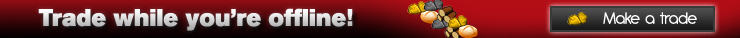
<style>
.page{position:relative;width:740px;height:38px}
.page>*{position:absolute;margin:0}
.t1{font:24px "AkzidenzGroteskBQ-Super"}
.t2{font:18px "Antipasto";color:#ffffff}
</style>
<div class="page">
<p class="t1" style="left:38px;top:8px;width:315px;height:23px">Trade while you’re offline!</p>
<p class="t2" style="left:603px;top:12px;width:94px;height:12px">Make a trade</p>
</div>
